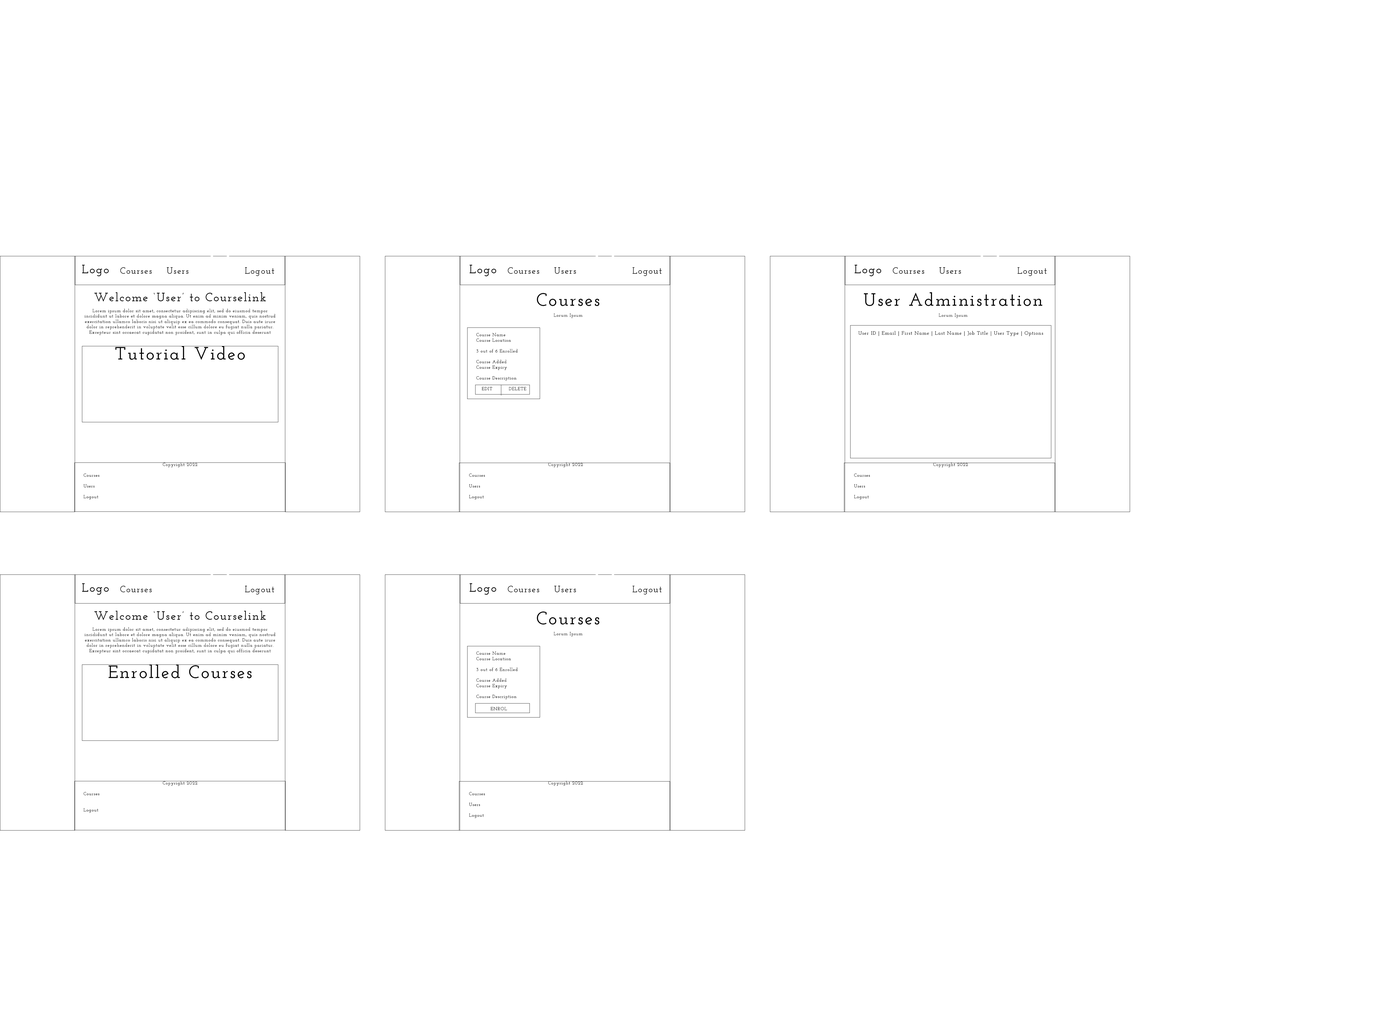
<style>
.page{position:relative;width:1384px;height:1026px;background:#ffffff}
.page>*{position:absolute;margin:0}
.t1{font:12px "JosefinSlab-SemiBold";letter-spacing:0.075em;color:#010101}
.t2{font:9px "JosefinSlab-SemiBold";letter-spacing:0.075em;color:#010101}
.t3{font:4.5px "JosefinSlab-SemiBold";letter-spacing:0.075em;color:#010101}
.t4{font:6px "JosefinSlab-SemiBold";letter-spacing:0.075em;color:#010101}
.t5{font:18px "JosefinSlab-SemiBold";letter-spacing:0.075em;color:#010101}
.t6{font:5px "JosefinSlab-SemiBold";letter-spacing:0.075em;color:#010101}
</style>
<div class="page">
<p class="t1" style="left:82px;top:265px;width:27px;height:11px">Logo</p>
<p class="t2" style="left:120px;top:267px;width:32px;height:7px">Courses</p>
<p class="t2" style="left:167px;top:267px;width:21px;height:7px">Users</p>
<p class="t2" style="left:245px;top:267px;width:29px;height:9px">Logout</p>
<p class="t1" style="left:470px;top:265px;width:26px;height:11px">Logo</p>
<p class="t2" style="left:508px;top:267px;width:31px;height:7px">Courses</p>
<p class="t2" style="left:554px;top:267px;width:22px;height:7px">Users</p>
<p class="t2" style="left:632px;top:267px;width:30px;height:9px">Logout</p>
<p class="t1" style="left:854px;top:265px;width:27px;height:11px">Logo</p>
<p class="t2" style="left:893px;top:267px;width:31px;height:7px">Courses</p>
<p class="t2" style="left:939px;top:267px;width:22px;height:7px">Users</p>
<p class="t2" style="left:1018px;top:267px;width:29px;height:9px">Logout</p>
<p class="t3" style="left:84px;top:292px;width:192px;height:43px;text-align:center"><span class="t1">Welcome ‘User’ to Courselink<br></span><br>Lorem ipsum dolor sit amet, consectetur adipiscing elit, sed do eiusmod tempor incididunt ut labore et dolore magna aliqua. Ut enim ad minim veniam, quis nostrud exercitation ullamco laboris nisi ut aliquip ex ea commodo consequat. Duis aute irure dolor in reprehenderit in voluptate velit esse cillum dolore eu fugiat nulla pariatur. Excepteur sint occaecat cupidatat non proident, sunt in culpa qui officia deserunt <span class="t4">mollit anim id est laborum.</span></p>
<p class="t3" style="left:537px;top:293px;width:63px;height:25px;text-align:center"><span class="t5">Courses</span><br><br>Lorum Ipsum</p>
<p class="t5" style="left:864px;top:292px;width:178px;height:26px;text-align:center">User Administration<br><span class="t3"><br>Lorum Ipsum</span></p>
<p class="t3" style="left:476px;top:333px;width:42px;height:48px">Course Name<br> Course Location<br><br> 3 out of 6 Enrolled<br><br> Course Added<br> Course Expiry<br><br> Course Description</p>
<p class="t6" style="left:858px;top:331px;width:185px;height:5px"><span class="t3"> <br></span>User ID | Email | First Name | Last Name | Job Title | User Type | Options</p>
<p class="t5" style="left:115px;top:346px;width:130px;height:14px">Tutorial Video</p>
<p class="t3" style="left:482px;top:387px;width:44px;height:3px">EDIT  DELETE</p>
<p class="t3" style="left:84px;top:462px;width:113px;height:38px;text-align:center">Copyright 2022<br><br> Courses<br><br> Users<br><br> Logout</p>
<p class="t3" style="left:469px;top:462px;width:114px;height:38px;text-align:center">Copyright 2022<br><br> Courses<br><br> Users<br><br> Logout</p>
<p class="t3" style="left:854px;top:462px;width:114px;height:38px;text-align:center">Copyright 2022<br><br> Courses<br><br> Users<br><br> Logout</p>
<p class="t1" style="left:82px;top:583px;width:27px;height:12px">Logo</p>
<p class="t2" style="left:120px;top:586px;width:32px;height:6px">Courses</p>
<p class="t2" style="left:245px;top:586px;width:29px;height:8px">Logout</p>
<p class="t1" style="left:470px;top:583px;width:26px;height:12px">Logo</p>
<p class="t2" style="left:508px;top:586px;width:31px;height:6px">Courses</p>
<p class="t2" style="left:554px;top:586px;width:22px;height:6px">Users</p>
<p class="t2" style="left:632px;top:586px;width:30px;height:8px">Logout</p>
<p class="t3" style="left:84px;top:611px;width:192px;height:43px;text-align:center"><span class="t1">Welcome ‘User’ to Courselink<br></span><br>Lorem ipsum dolor sit amet, consectetur adipiscing elit, sed do eiusmod tempor incididunt ut labore et dolore magna aliqua. Ut enim ad minim veniam, quis nostrud exercitation ullamco laboris nisi ut aliquip ex ea commodo consequat. Duis aute irure dolor in reprehenderit in voluptate velit esse cillum dolore eu fugiat nulla pariatur. Excepteur sint occaecat cupidatat non proident, sunt in culpa qui officia deserunt <span class="t4">mollit anim id est laborum.</span></p>
<p class="t3" style="left:537px;top:612px;width:63px;height:24px;text-align:center"><span class="t5">Courses</span><br><br>Lorum Ipsum</p>
<p class="t3" style="left:476px;top:652px;width:42px;height:47px">Course Name<br> Course Location<br><br> 3 out of 6 Enrolled<br><br> Course Added<br> Course Expiry<br><br> Course Description</p>
<p class="t5" style="left:108px;top:664px;width:144px;height:14px">Enrolled Courses</p>
<p class="t3" style="left:490px;top:707px;width:17px;height:3px">ENROL</p>
<p class="t3" style="left:84px;top:781px;width:113px;height:32px;text-align:center">Copyright 2022<br><br> Courses<br><br><br> Logout</p>
<p class="t3" style="left:469px;top:781px;width:114px;height:37px;text-align:center">Copyright 2022<br><br> Courses<br><br> Users<br><br> Logout</p>
</div>
